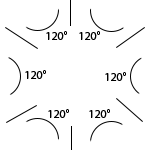
<style>
.page{position:relative;width:150px;height:150px;background:#ffffff}
.page>*{position:absolute;margin:0}
.t1{font:12px "MyriadPro-Regular";color:#000000}
</style>
<div class="page">
<p class="t1" style="left:25px;top:70px;width:21px;height:9px">120°</p>
</div>
